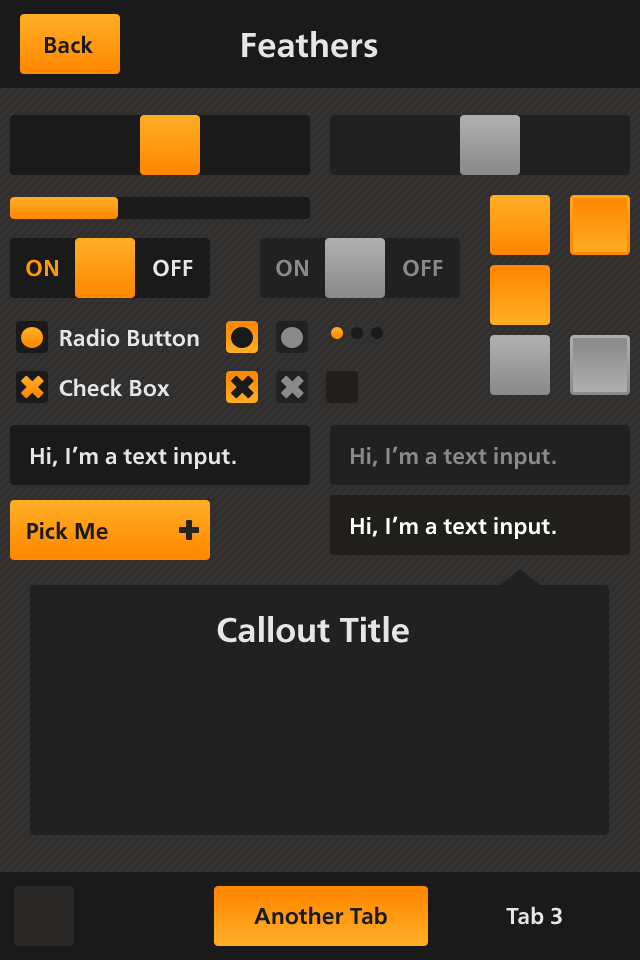
<style>
.page{position:relative;width:640px;height:960px;background:#212121}
.page>*{position:absolute;margin:0}
.t1{font:24px "CartoGothicStd-Bold";color:#1a1a1a}
.t2{font:36px "CartoGothicStd-Bold";color:#e6e6e6}
.t3{font:24px "CartoGothicStd-Bold";color:#ff9900}
.t4{font:24px "CartoGothicStd-Bold";color:#e6e6e6}
.t5{font:24px "CartoGothicStd-Bold";color:#8a8a8a}
.t6{font:24px "CartoGothicStd-Bold";color:#fefefe}
</style>
<div class="page">
<p class="t1" style="left:45px;top:35px;width:48px;height:19px">Back</p>
<p class="t2" style="left:242px;top:31px;width:136px;height:27px">Feathers</p>
<p class="t3" style="left:26px;top:259px;width:32px;height:18px">ON</p>
<p class="t4" style="left:153px;top:259px;width:40px;height:18px">OFF</p>
<p class="t5" style="left:276px;top:259px;width:32px;height:18px">ON</p>
<p class="t5" style="left:403px;top:259px;width:40px;height:18px">OFF</p>
<p class="t4" style="left:60px;top:328px;width:139px;height:19px">Radio Button</p>
<p class="t4" style="left:59px;top:378px;width:111px;height:19px">Check Box</p>
<p class="t4" style="left:31px;top:446px;width:205px;height:23px">Hi, I’m a text input.</p>
<p class="t5" style="left:351px;top:446px;width:205px;height:23px">Hi, I’m a text input.</p>
<p class="t1" style="left:27px;top:521px;width:81px;height:19px">Pick Me</p>
<p class="t6" style="left:351px;top:516px;width:205px;height:23px">Hi, I’m a text input.</p>
<p class="t2" style="left:217px;top:616px;width:192px;height:27px">Callout Title</p>
<p class="t1" style="left:254px;top:906px;width:133px;height:19px">Another Tab</p>
<p class="t4" style="left:506px;top:906px;width:56px;height:19px">Tab 3</p>
</div>
